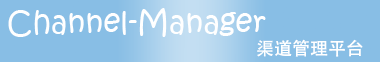
<style>
.page{position:relative;width:380px;height:62px;background:#88bee5}
.page>*{position:absolute;margin:0}
.t1{font:30px "KristenITC-Regular";color:#ffffff}
.t2{font:18px "AdobeHeitiStd-Regular";color:#ffffff}
</style>
<div class="page">
<p class="t1" style="left:8px;top:8px;width:258px;height:29px">Channel-Manager</p>
<p class="t2" style="left:257px;top:39px;width:106px;height:18px">渠道管理平台</p>
</div>
